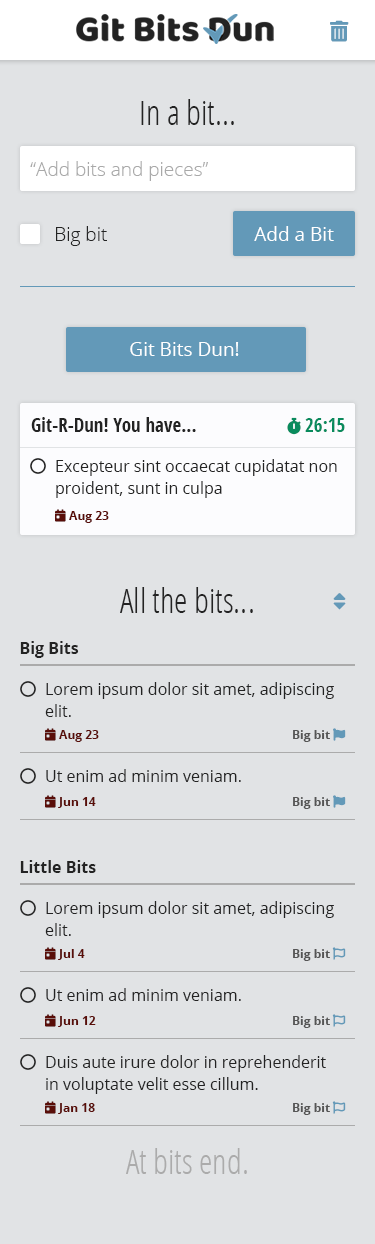
<style>
.page{position:relative;width:375px;height:1244px;background:#e1e3e5}
.page>*{position:absolute;margin:0}
.t1{font:34px "OpenSansCondensed-Light";color:#232323}
.t2{font:19px "OpenSans-Light";color:#a9a9a9}
.t3{font:19px "OpenSans-Light";color:#232323}
.t4{font:19px "OpenSans-Regular";color:#ffffff}
.t5{font:19px "OpenSansCondensed-Bold";color:#232323}
.t6{font:16px/22px "OpenSans-Regular";color:#232323}
.t7{font:16px "OpenSans-Bold";color:#232323}
.t8{font:16px "OpenSans-Regular";color:#232323}
.t9{font:34px "OpenSansCondensed-Light";color:#ababab}
</style>
<div class="page">
<p class="t1" style="left:141px;top:99px;width:93px;height:26px">In a bit...</p>
<p class="t2" style="left:30px;top:161px;width:178px;height:20px">“Add bits and pieces”</p>
<p class="t3" style="left:56px;top:226px;width:51px;height:20px">Big bit</p>
<p class="t4" style="left:254px;top:226px;width:80px;height:15px">Add a Bit</p>
<p class="t4" style="left:130px;top:342px;width:109px;height:14px">Git Bits Dun!</p>
<p class="t5" style="left:31px;top:417px;width:165px;height:15px">Git-R-Dun! You have...</p>
<p class="t6" style="left:56px;top:459px;width:281px;height:39px">Excepteur sint occaecat cupidatat non proident, sunt in culpa</p>
<p class="t1" style="left:120px;top:587px;width:133px;height:26px">All the bits...</p>
<p class="t7" style="left:20px;top:641px;width:59px;height:17px">Big Bits</p>
<p class="t6" style="left:45px;top:682px;width:289px;height:35px">Lorem ipsum dolor sit amet, adipiscing elit.</p>
<p class="t8" style="left:46px;top:769px;width:195px;height:13px">Ut enim ad minim veniam.</p>
<p class="t7" style="left:20px;top:860px;width:76px;height:13px">Little Bits</p>
<p class="t6" style="left:45px;top:901px;width:289px;height:35px">Lorem ipsum dolor sit amet, adipiscing elit.</p>
<p class="t8" style="left:46px;top:988px;width:195px;height:13px">Ut enim ad minim veniam.</p>
<p class="t6" style="left:46px;top:1055px;width:280px;height:39px">Duis aute irure dolor in reprehenderit in voluptate velit esse cillum.</p>
<p class="t9" style="left:126px;top:1148px;width:121px;height:26px">At bits end.</p>
</div>
